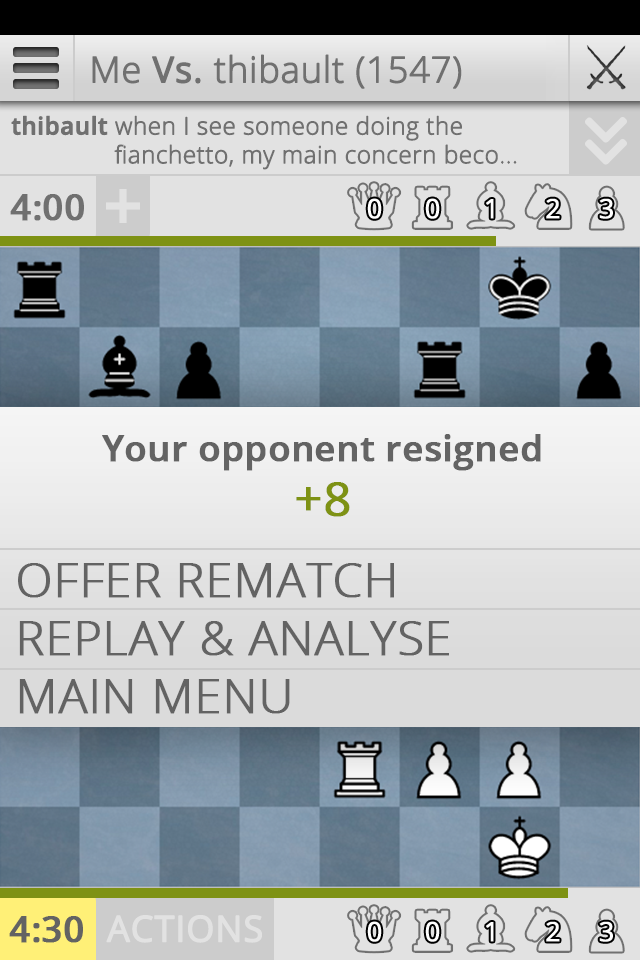
<style>
.page{position:relative;width:640px;height:960px}
.page>*{position:absolute;margin:0}
.t1{font:36px "OpenSans-Light";color:#707070;font-weight:bold}
.t2{font:36px "OpenSans";color:#707070;font-weight:bold}
.t3{font:24px "OpenSans-Light";color:#707070;font-weight:bold}
.t4{font:24px "OpenSans-Semibold";color:#707070;font-weight:bold}
.t5{font:36px "OpenSans-Semibold";color:#707070;font-weight:bold}
.t6{font:26.8px "OpenSans";color:#ffffff;font-weight:bold}
.t7{font:36px/48px "OpenSans-Semibold";color:#636363;font-weight:bold}
.t8{font:48px/55px "OpenSans";color:#7e9214;font-weight:bold}
.t9{font:48px "OpenSans-Light";color:#636363;font-weight:bold}
.t10{font:36px "OpenSans-Semibold";color:#636363;font-weight:bold}
.t11{font:36px "OpenSans";color:#e2e2e2;font-weight:bold}
</style>
<div class="page">
<p class="t1" style="left:92px;top:54px;width:370px;height:35px">Me <span class="t2">Vs.</span> thibault (1547)</p>
<p class="t3" style="left:11px;top:115px;width:506px;height:55px"><span class="t4">thibault</span> when I see someone doing the<br>               fianchetto, my main concern beco...</p>
<p class="t5" style="left:10px;top:194px;width:74px;height:27px">4:00</p>
<p class="t6" style="left:367px;top:198px;width:15px;height:21px">0</p>
<p class="t6" style="left:425px;top:198px;width:15px;height:21px">0</p>
<p class="t6" style="left:546px;top:198px;width:14px;height:21px">2</p>
<p class="t6" style="left:599px;top:198px;width:14px;height:21px">3</p>
<p class="t6" style="left:486px;top:199px;width:8px;height:20px">1</p>
<p class="t7" style="left:102px;top:434px;width:439px;height:83px;text-align:center">Your opponent resigned<br><span class="t8">+8</span></p>
<p class="t9" style="left:18px;top:563px;width:431px;height:151px">OFFER REMATCH<br>REPLAY &amp; ANALYSE<br>MAIN MENU</p>
<p class="t10" style="left:9px;top:916px;width:74px;height:27px">4:30</p>
<p class="t11" style="left:106px;top:915px;width:156px;height:28px">ACTIONS</p>
<p class="t6" style="left:367px;top:921px;width:15px;height:21px">0</p>
<p class="t6" style="left:425px;top:921px;width:15px;height:21px">0</p>
<p class="t6" style="left:486px;top:922px;width:8px;height:20px">1</p>
<p class="t6" style="left:546px;top:921px;width:14px;height:21px">2</p>
<p class="t6" style="left:599px;top:921px;width:14px;height:21px">3</p>
</div>
